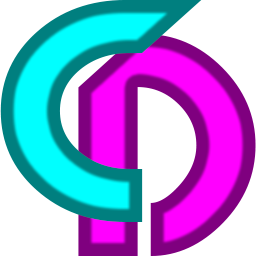
<style>
.page{position:relative;width:256px;height:256px;background:#ffffff}
.page>*{position:absolute;margin:0}
.t1{font:300px "New_Zelek"}
</style>
<div class="page">
<p class="t1" style="left:0px;top:0px;width:202px;height:222px">C</p>
<p class="t1" style="left:78px;top:34px;width:178px;height:222px">D</p>
</div>
